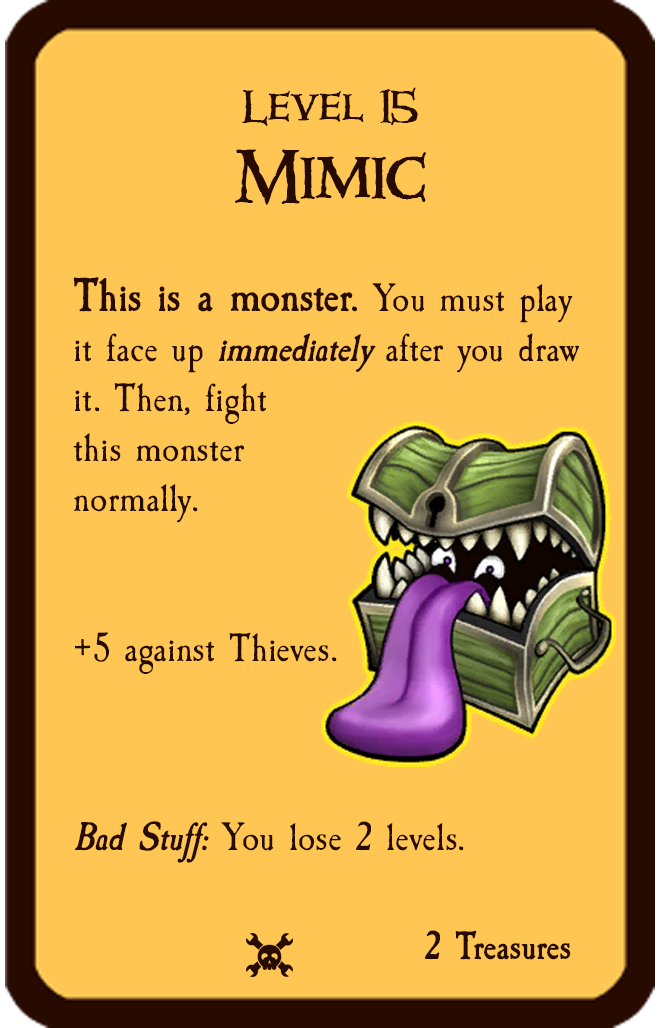
<style>
.page{position:relative;width:661px;height:1028px;background:#ffc654}
.page>*{position:absolute;margin:0}
.t1{font:41.7px "Windlass";color:#270b00}
.t2{font:66.7px "Windlass";color:#270b00}
.t3{font:41.7px "CaslonAntique";color:#270b00}
.t4{font:50px "CaslonAntique-Bold";color:#270b00}
.t5{font:41.7px "CaslonAntique-BoldItalic";color:#270b00}
.t6{font:41.7px "CaslonAntique-Bold";color:#270b00}
</style>
<div class="page">
<p class="t1" style="left:234px;top:87px;width:193px;height:118px;text-align:center">Level 15<br><span class="t2">Mimic</span></p>
<p class="t3" style="left:73px;top:277px;width:506px;height:397px"><span class="t4">This is a monster.</span> You must play it face up <span class="t5">immediately </span>after you draw it. Then, fight<br>this monster <br>normally. <br><br><br>+5 against Thieves.</p>
<p class="t3" style="left:75px;top:821px;width:389px;height:42px"><span class="t5">Bad Stuff:</span> You lose 2 levels.</p>
<p class="t6" style="left:425px;top:930px;width:146px;height:30px">2 Treasures</p>
</div>
